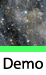
<style>
.page{position:relative;width:46px;height:75px;background:#ffffff}
.page>*{position:absolute;margin:0}
.t1{font:16px "MyriadPro-Regular";color:#000000}
</style>
<div class="page">
<p class="t1" style="left:3px;top:57px;width:40px;height:12px">Demo</p>
</div>
